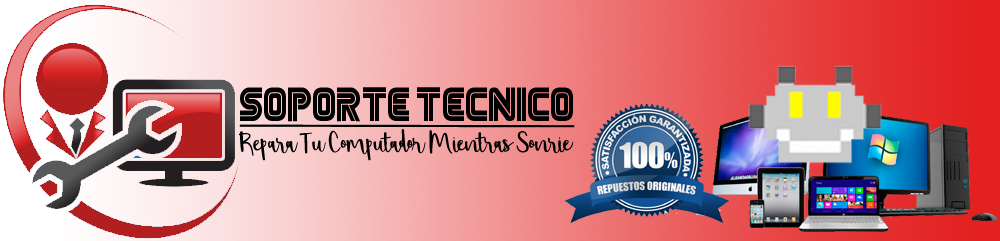
<style>
.page{position:relative;width:1000px;height:241px}
.page>*{position:absolute;margin:0}
.t1{font:39.6px "MrRobot";color:#000000;scale:0.87 1}
.t2{font:48.2px "Shorthalt";letter-spacing:-0.04em;color:#000000}
</style>
<div class="page">
<p class="t1" style="left:240px;top:87px;width:333px;height:35px">soporte tecnico</p>
<p class="t2" style="left:239px;top:129px;width:335px;height:32px">Repara Tu Computador Mientras Sonrie</p>
</div>
